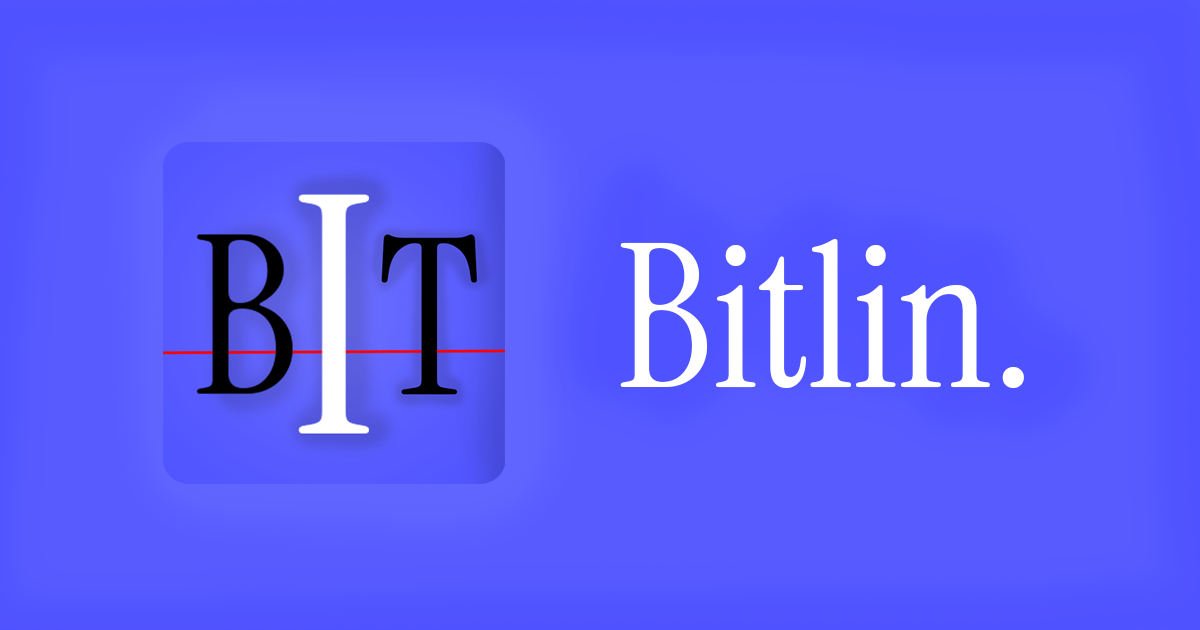
<style>
.page{position:relative;width:1200px;height:630px;background:#585cff}
.page>*{position:absolute;margin:0}
.t1{font:200px "InstrumentSerif-Regular";color:#ffffff}
</style>
<div class="page">
<p class="t1" style="left:620px;top:238px;width:404px;height:150px">Bitlin.</p>
</div>
